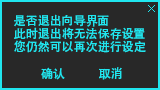
<style>
.page{position:relative;width:160px;height:90px;background:#282828}
.page>*{position:absolute;margin:0}
.t1{font:12px "AdobeHeitiStd-Regular";color:#20e6ef}
</style>
<div class="page">
<p class="t1" style="left:14px;top:14px;width:95px;height:13px">是否退出向导界面</p>
<p class="t1" style="left:14px;top:27px;width:131px;height:13px">此时退出将无法保存设置</p>
<p class="t1" style="left:14px;top:40px;width:132px;height:13px">您仍然可以再次进行设定</p>
<p class="t1" style="left:41px;top:67px;width:24px;height:13px">确认</p>
<p class="t1" style="left:99px;top:67px;width:23px;height:13px">取消</p>
</div>
